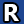
<style>
.page{position:relative;width:24px;height:24px;background:#1d4590}
.page>*{position:absolute;margin:0}
.t1{font:24px "SegoeUI-Bold";color:#ffffff}
</style>
<div class="page">
<p class="t1" style="left:4px;top:4px;width:15px;height:17px">R</p>
</div>
